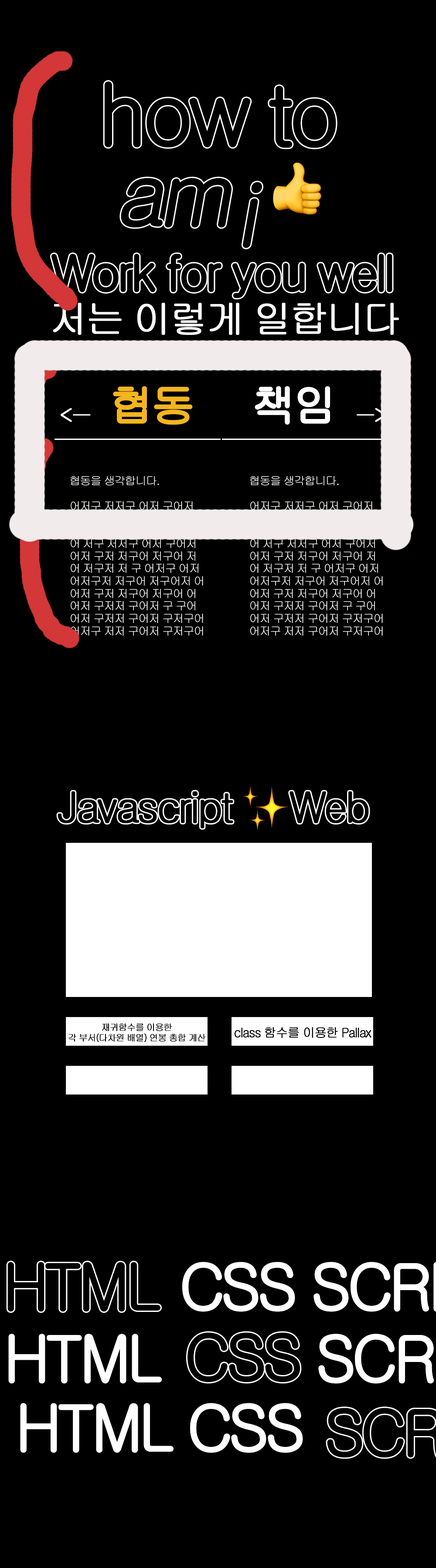
<style>
.page{position:relative;width:436px;height:1568px;background:#000000}
.page>*{position:absolute;margin:0}
.t1{font:38.4px "Gulim";letter-spacing:-0.08em;color:#ffffff;font-weight:bold}
.t2{font:44px "Gulim";letter-spacing:-0.08em;color:#f3b520;font-weight:bold}
.t3{font:44px "Gulim";letter-spacing:-0.08em;color:#ffffff;font-weight:bold}
.t4{font:20.3px "Gulim";letter-spacing:-0.08em;color:#ffffff;font-weight:bold}
.t5{font:11.4px/12.5px "Gulim";letter-spacing:-0.08em;color:#ffffff}
.t6{font:9.2px/10.3px "Gulim";letter-spacing:-0.08em;color:#000000;font-weight:bold}
.t7{font:12.9px "Gulim";letter-spacing:-0.08em;color:#000000;font-weight:bold;scale:0.96 1}
.t8{font:62.7px "Gulim";letter-spacing:-0.08em;color:#ffffff;font-weight:bold}
</style>
<div class="page">
<p class="t1" style="left:53px;top:303px;width:346px;height:32px">저는 이렇게 일합니다</p>
<p class="t2" style="left:113px;top:386px;width:80px;height:39px">협동</p>
<p class="t3" style="left:254px;top:386px;width:76px;height:39px">책임</p>
<p class="t4" style="left:61px;top:408px;width:30px;height:14px;rotate:180deg">ㅡ&gt;</p>
<p class="t4" style="left:356px;top:408px;width:30px;height:14px">ㅡ&gt;</p>
<p class="t5" style="left:70px;top:476px;width:133px;height:160px">협동을 생각합니다.<br><br>어저구 저저구 어저 구어저<br>어저 구저저 구 어 저 구어저<br>어저구 저저 구어저구 어저<br>어 저구 저저구 어저 구어저<br>어저 구저 저구어 저구어 저<br>어 저구저 저 구 어저구 어저<br>어저구저 저구어 저구어저 어<br>어저 구저 저구어 저구어 어<br>어저 구저저 구어저 구 구어<br>어저 구저저 구어저 구저구어<br>어저구 저저 구어저 구저구어</p>
<p class="t5" style="left:250px;top:476px;width:132px;height:160px">협동을 생각합니다.<br><br>어저구 저저구 어저 구어저<br>어저 구저저 구 어 저 구어저<br>어저구 저저 구어저구 어저<br>어 저구 저저구 어저 구어저<br>어저 구저 저구어 저구어 저<br>어 저구저 저 구 어저구 어저<br>어저구저 저구어 저구어저 어<br>어저 구저 저구어 저구어 어<br>어저 구저저 구어저 구 구어<br>어저 구저저 구어저 구저구어<br>어저구 저저 구어저 구저구어</p>
<p class="t6" style="left:68px;top:1023px;width:138px;height:19px;text-align:center">재귀함수를 이용한<br>각 부서(다차원 배열) 연봉 총합 계산</p>
<p class="t7" style="left:234px;top:1027px;width:137px;height:11px">class 함수를 이용한 Pallax</p>
<p class="t8" style="left:20px;top:1403px;width:283px;height:50px">HTML CSS</p>
</div>
